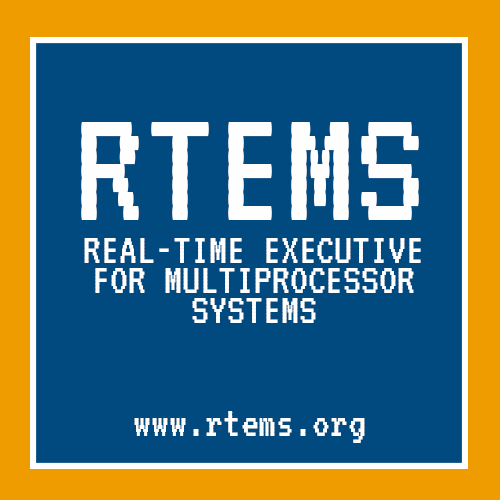
<style>
.page{position:relative;width:500px;height:500px;background:#004a80}
.page>*{position:absolute;margin:0}
.t1{font:175px "VT323-Regular";color:#fefefe}
.t2{font:45px/30px "VT323-Regular";color:#fefefe}
.t3{font:45px "VT323-Regular";color:#fefefe}
</style>
<div class="page">
<p class="t1" style="left:81px;top:122px;width:338px;height:98px">RTEMS</p>
<p class="t2" style="left:84px;top:238px;width:337px;height:85px;text-align:center">REAL-TIME EXECUTIVE FOR MULTIPROCESSOR SYSTEMS</p>
<p class="t3" style="left:134px;top:411px;width:231px;height:32px">www.rtems.org</p>
</div>
